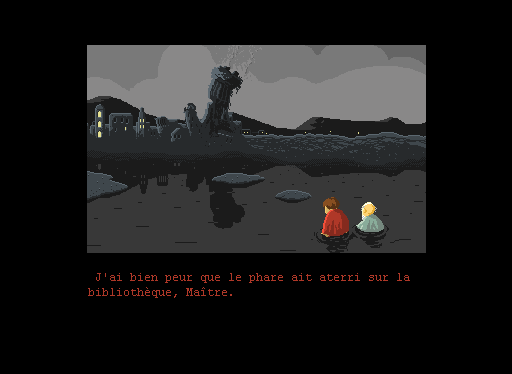
<style>
.page{position:relative;width:512px;height:374px;background:#000000}
.page>*{position:absolute;margin:0}
.t1{font:12px "CourierNewPSMT";color:#af3828}
</style>
<div class="page">
<p class="t1" style="left:88px;top:273px;width:322px;height:25px">J'ai bien peur que le phare ait aterri sur la bibliothèque, Maître.</p>
</div>
